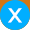
<style>
.page{position:relative;width:30px;height:30px;background:#00aeff}
.page>*{position:absolute;margin:0}
.t1{font:27.8px "YDIYGO330";letter-spacing:0.01em;color:#ffffff}
</style>
<div class="page">
<p class="t1" style="left:8px;top:8px;width:14px;height:15px">x</p>
</div>
